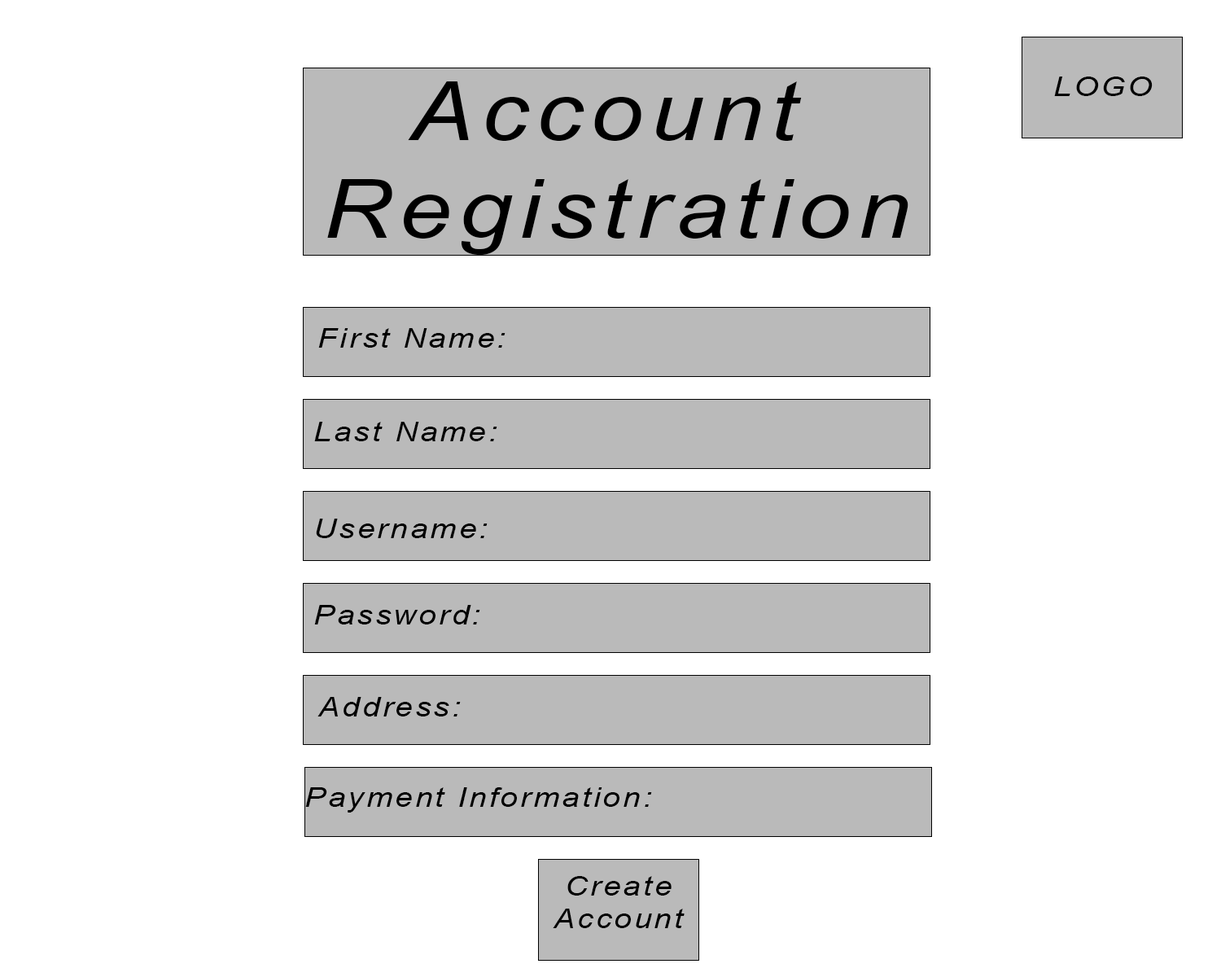
<style>
.page{position:relative;width:1221px;height:977px;background:#ffffff}
.page>*{position:absolute;margin:0}
.t1{font:27.1px "Arial-ItalicMT";letter-spacing:0.08em;color:#000000;scale:1.16 1}
.t2{font:81.4px "Arial-ItalicMT";letter-spacing:0.08em;color:#000000;scale:1.16 1}
</style>
<div class="page">
<p class="t1" style="left:1054px;top:77px;width:99px;height:19px">LOGO</p>
<p class="t2" style="left:327px;top:81px;width:581px;height:174px;text-align:center">Account <br>Registration</p>
<p class="t1" style="left:318px;top:328px;width:187px;height:20px">First Name:</p>
<p class="t1" style="left:314px;top:422px;width:183px;height:19px">Last Name:</p>
<p class="t1" style="left:316px;top:518px;width:172px;height:20px">Username:</p>
<p class="t1" style="left:314px;top:605px;width:166px;height:19px">Password:</p>
<p class="t1" style="left:317px;top:697px;width:144px;height:19px">Address:</p>
<p class="t1" style="left:305px;top:787px;width:347px;height:25px">Payment Information:</p>
<p class="t1" style="left:553px;top:876px;width:132px;height:52px;text-align:center">Create Account</p>
</div>
